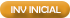
<style>
.page{position:relative;width:70px;height:18px}
.page>*{position:absolute;margin:0}
.t1{font:10px "BerlinSansFB-Reg";color:#ffffff}
</style>
<div class="page">
<p class="t1" style="left:11px;top:6px;width:50px;height:7px">INV INICIAL</p>
</div>
